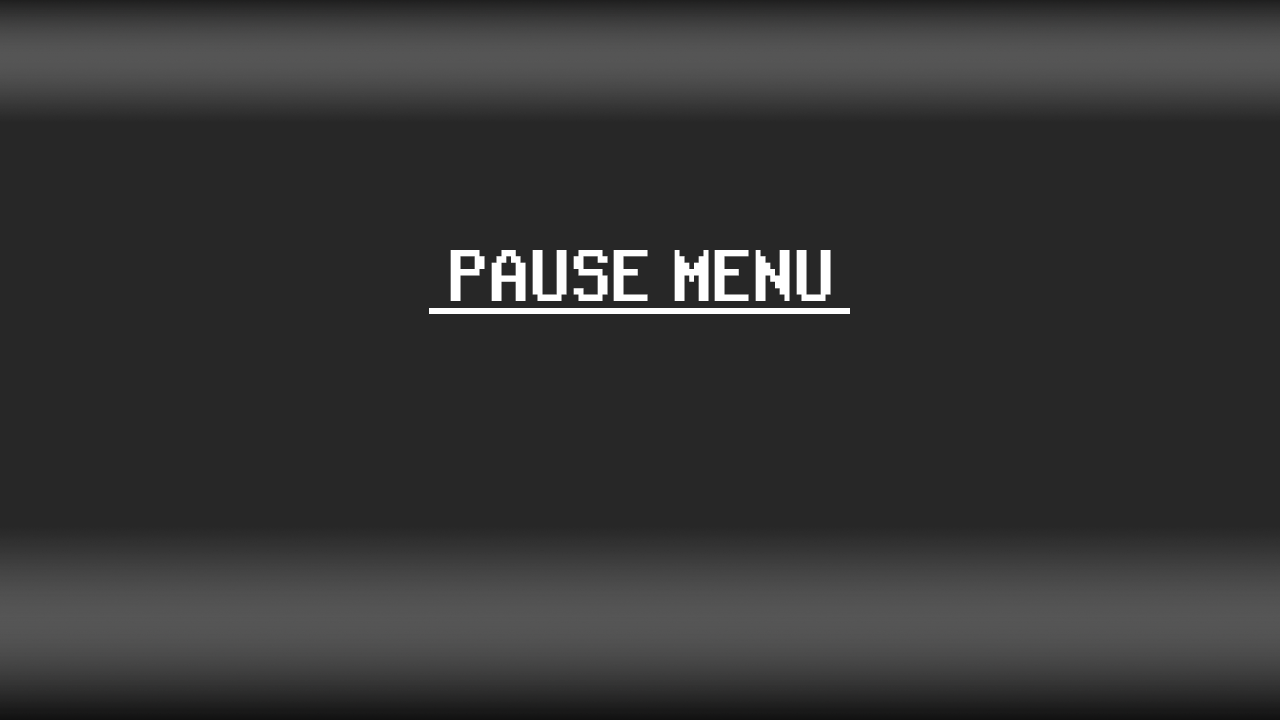
<style>
.page{position:relative;width:1280px;height:720px;background:#272727}
.page>*{position:absolute;margin:0}
.t1{font:70.2px "RetroGaming";color:#ffffff;scale:0.75 1}
</style>
<div class="page">
<p class="t1" style="left:450px;top:250px;width:381px;height:51px">PAUSE MENU</p>
</div>
